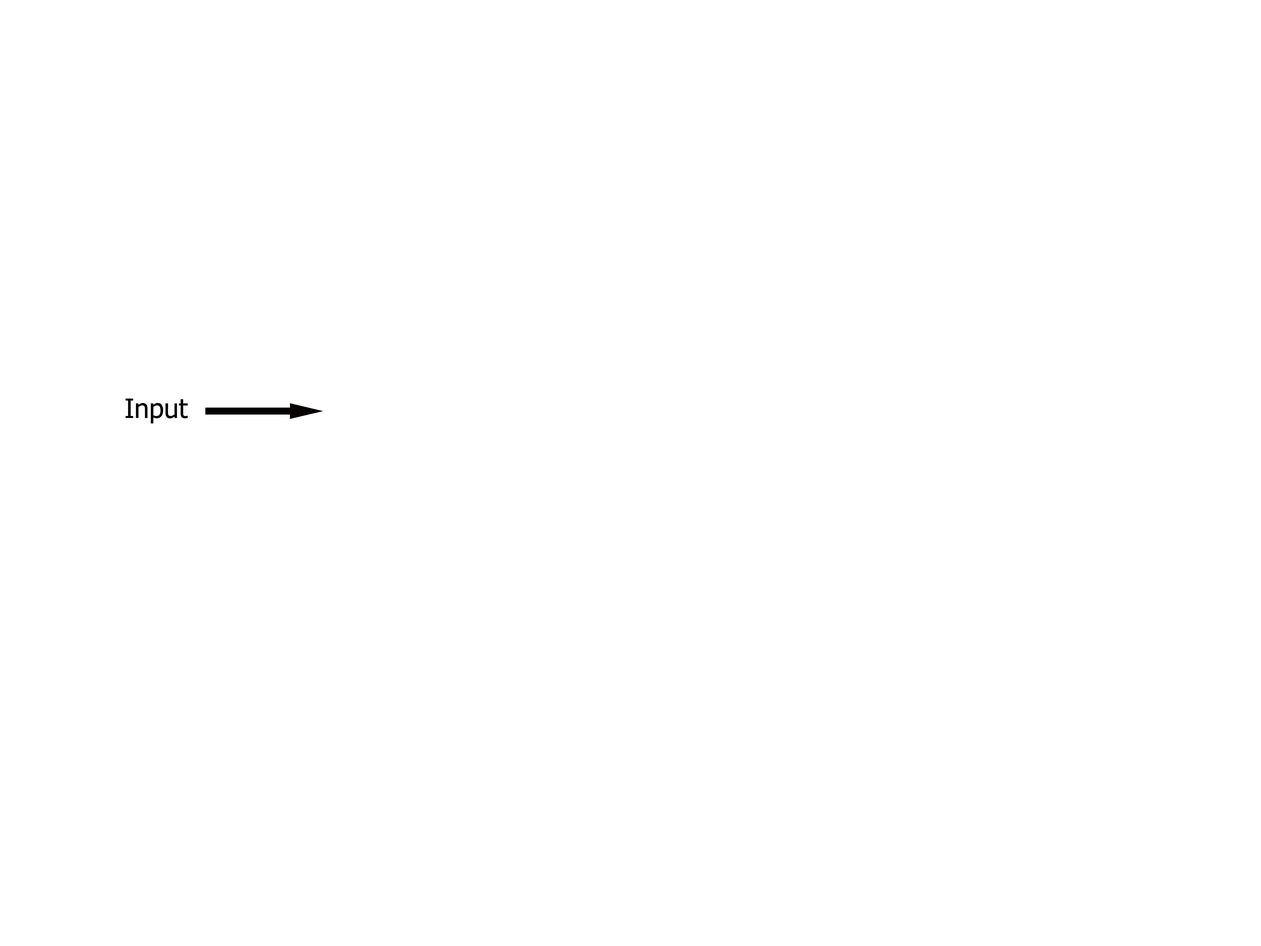
<style>
.page{position:relative;width:1261px;height:946px;background:#ffffff}
.page>*{position:absolute;margin:0}
.t1{font:26.7px "Tahoma";color:#000000}
</style>
<div class="page">
<p class="t1" style="left:125px;top:398px;width:63px;height:25px">Input</p>
</div>
